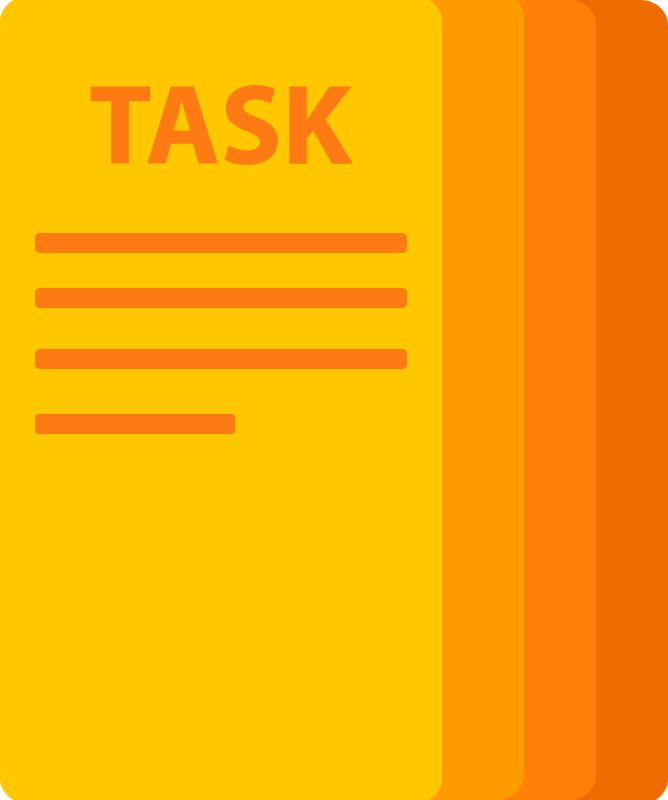
<style>
.page{position:relative;width:668px;height:800px;background:#ffc700}
.page>*{position:absolute;margin:0}
.t1{font:150px "TFPhethai";color:#fe7a12}
</style>
<div class="page">
<p class="t1" style="left:90px;top:85px;width:263px;height:80px">TASK</p>
</div>
